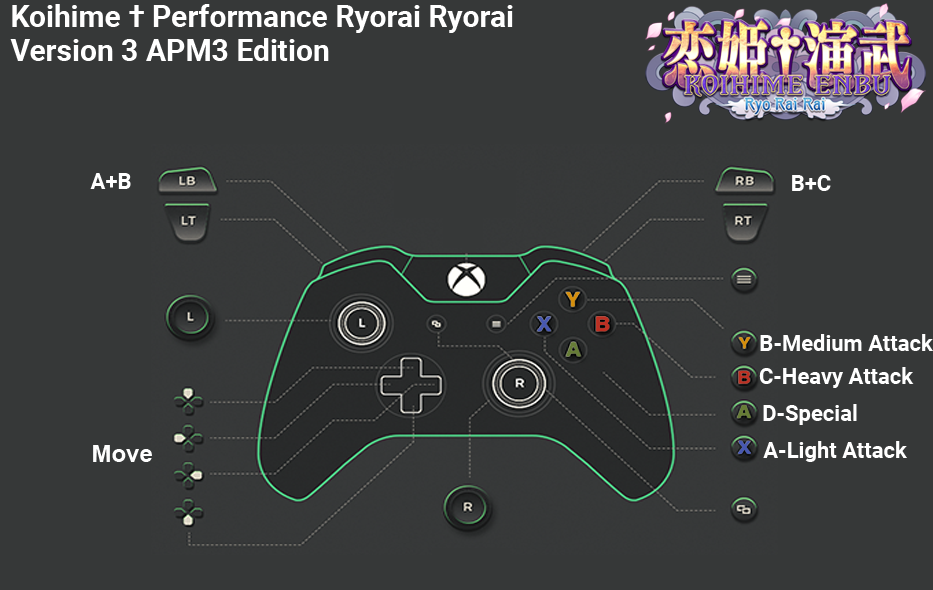
<style>
.page{position:relative;width:933px;height:590px;background:#363838}
.page>*{position:absolute;margin:0}
.t1{font:30px/34px "Roboto-Bold";color:#ffffff}
.t2{font:22px "Roboto-Bold";color:#ffffff}
.t3{font:24px "Arial-BoldMT";color:#fefefe}
</style>
<div class="page">
<p class="t1" style="left:10px;top:4px;width:503px;height:57px">Koihime † Performance Ryorai Ryorai<br>Version 3 APM3 Edition</p>
<p class="t2" style="left:90px;top:173px;width:41px;height:16px">A+B</p>
<p class="t2" style="left:792px;top:175px;width:39px;height:16px">B+C</p>
<p class="t2" style="left:760px;top:334px;width:173px;height:17px">B-Medium Attack</p>
<p class="t2" style="left:759px;top:367px;width:155px;height:21px">C-Heavy Attack</p>
<p class="t2" style="left:763px;top:404px;width:94px;height:21px">D-Special</p>
<p class="t3" style="left:93px;top:445px;width:59px;height:17px">Move</p>
<p class="t2" style="left:763px;top:441px;width:144px;height:21px">A-Light Attack</p>
</div>
